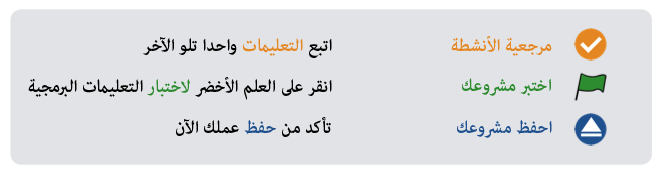
<style>
.page{position:relative;width:664px;height:176px;background:#e2e3e6}
.page>*{position:absolute;margin:0}
.t1{font:24px "AdobeArabic-Bold";color:#000000}
.t2{font:24px "AdobeArabic-Bold";color:#e48621}
.t3{font:24px "AdobeArabic-Bold";color:#010101}
.t4{font:24px "AdobeArabic-Bold";color:#2d8b30}
.t5{font:24px "AdobeArabic-Bold";color:#1f508e}
</style>
<div class="page">
<p class="t1" style="left:143px;top:37px;width:189px;height:21px">اتبع<span class="t2"> التعليمات </span>واحدا تلو الآخر</p>
<p class="t2" style="left:451px;top:36px;width:101px;height:20px">مرجعية الأنشطة</p>
<p class="t3" style="left:28px;top:77px;width:304px;height:23px">انقر على العلم الأخضر <span class="t4">لاختبار</span> التعليمات البرمجية</p>
<p class="t4" style="left:462px;top:78px;width:89px;height:18px">اختبر مشروعك</p>
<p class="t1" style="left:176px;top:117px;width:155px;height:20px">تأكد من <span class="t5">حفظ</span> عملك الآن</p>
<p class="t5" style="left:457px;top:120px;width:95px;height:18px">احفظ مشروعك</p>
</div>
